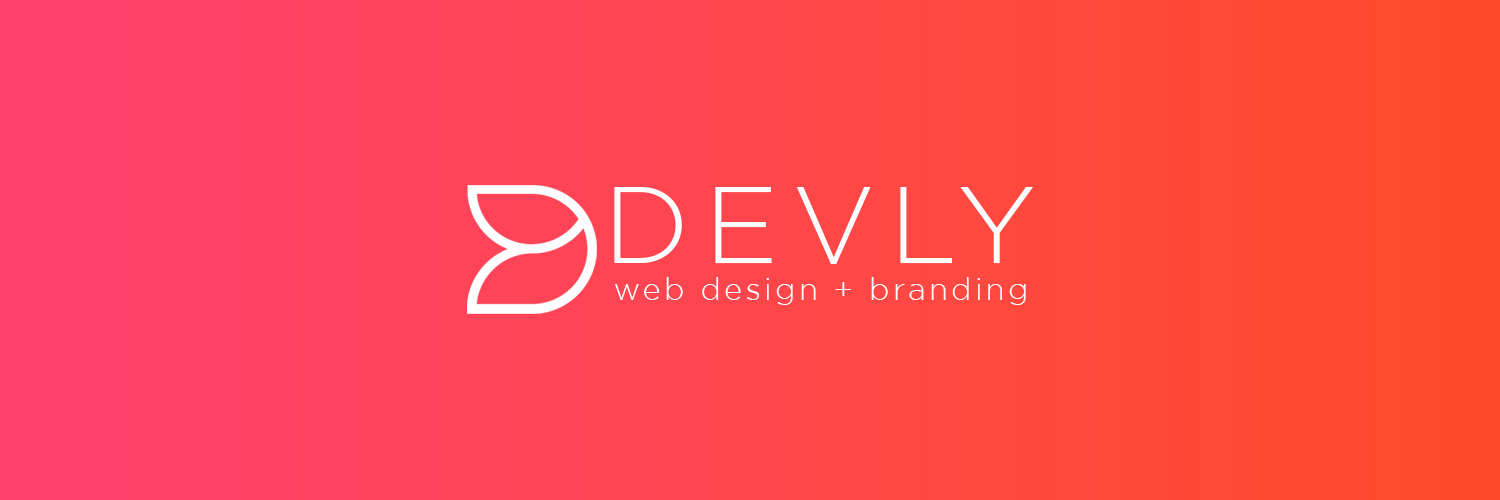
<style>
.page{position:relative;width:1500px;height:500px}
.page>*{position:absolute;margin:0}
.t1{font:109.2px "Gotham-Light";letter-spacing:0.125em;color:#ffffff}
.t2{font:31.2px "Gotham-Light";letter-spacing:0.1em;color:#ffffff}
</style>
<div class="page">
<p class="t1" style="left:614px;top:187px;width:419px;height:77px">DEVLY</p>
<p class="t2" style="left:615px;top:277px;width:411px;height:28px">web design + branding</p>
</div>
